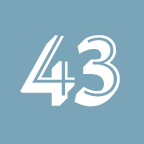
<style>
.page{position:relative;width:144px;height:144px;background:#7aa5b8}
.page>*{position:absolute;margin:0}
.t1{font:85.9px "Landmark-Dimensional";color:#ffffff}
</style>
<div class="page">
<p class="t1" style="left:20px;top:35px;width:100px;height:72px">43</p>
</div>
